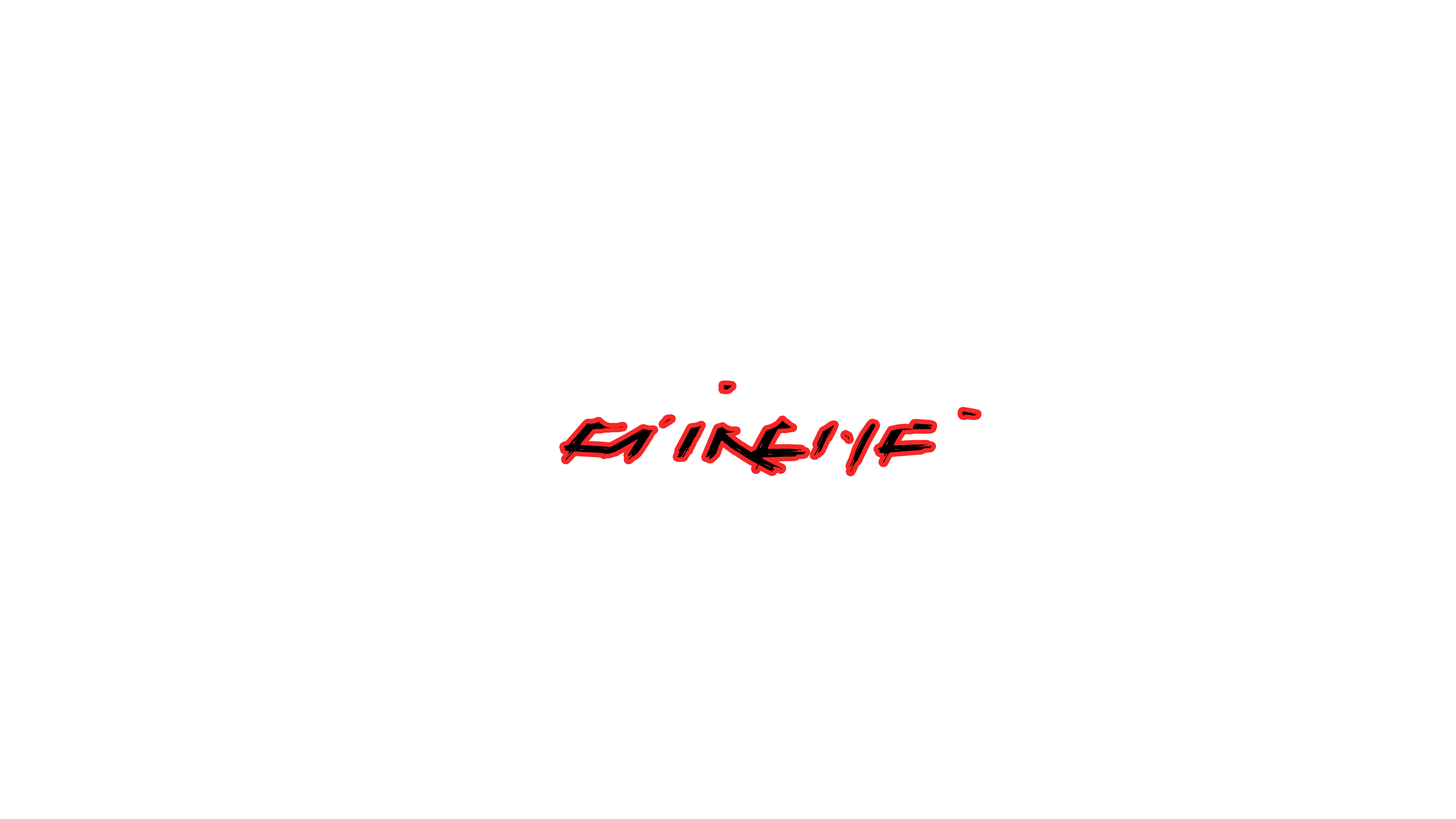
<style>
.page{position:relative;width:1456px;height:819px;background:#ffffff}
.page>*{position:absolute;margin:0}
.t1{font:56.4px "TrueLies";letter-spacing:0.06em;scale:1.73 1}
</style>
<div class="page">
<p class="t1" style="left:564px;top:380px;width:413px;height:92px">extreme</p>
</div>
